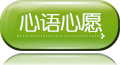
<style>
.page{position:relative;width:120px;height:65px}
.page>*{position:absolute;margin:0}
.t1{font:20.3px "YouYuan";letter-spacing:-0.06em;color:#fdfcfc;font-weight:bold;scale:1.05 1}
</style>
<div class="page">
<p class="t1" style="left:19px;top:13px;width:83px;height:20px">心语心愿</p>
</div>
